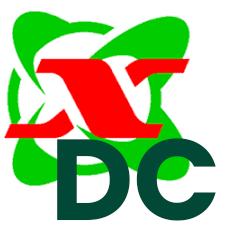
<style>
.page{position:relative;width:225px;height:225px;background:#ffffff}
.page>*{position:absolute;margin:0}
.t1{font:115px "Poppins-Bold";color:#014936}
</style>
<div class="page">
<p class="t1" style="left:57px;top:138px;width:159px;height:83px">DC</p>
</div>
